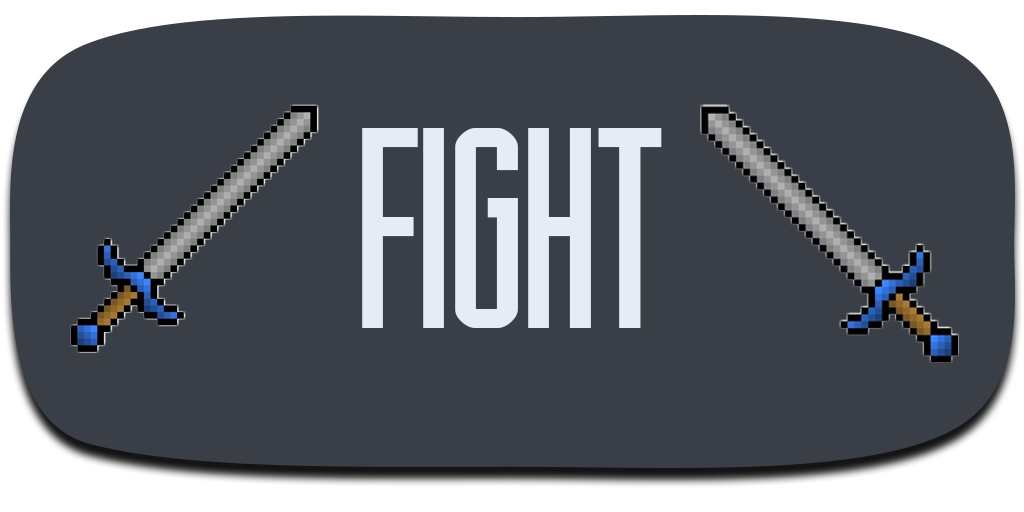
<style>
.page{position:relative;width:1024px;height:512px;background:#3a3f47}
.page>*{position:absolute;margin:0}
.t1{font:250px "AA-Higherup";color:#e6ecf5;scale:1.11 1}
</style>
<div class="page">
<p class="t1" style="left:362px;top:128px;width:300px;height:200px">Fight</p>
</div>
